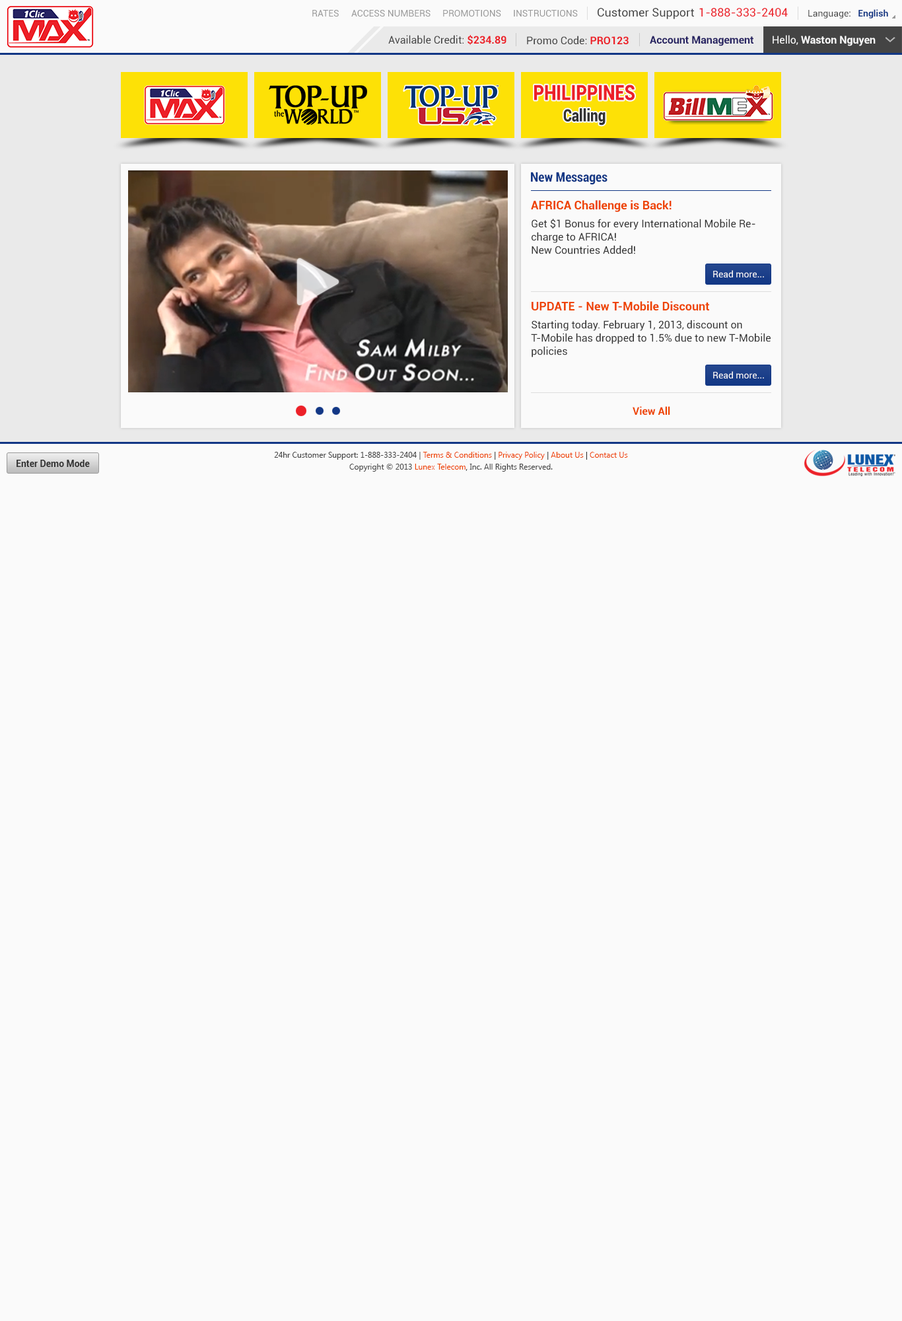
<style>
.page{position:relative;width:902px;height:1321px;background:#fafafa}
.page>*{position:absolute;margin:0}
.t1{font:9.2px "Roboto-Regular";color:#999999}
.t2{font:11.6px "Roboto-Regular";color:#444444}
.t3{font:11.6px "Roboto-Regular";color:#ec2029}
.t4{font:9.2px "Roboto-Regular";color:#444444}
.t5{font:9.2px "Roboto-Bold";color:#123785}
.t6{font:10.6px "Roboto-Regular";color:#444444}
.t7{font:10.6px "Roboto-Bold";color:#ec2028}
.t8{font:10.6px "Roboto-Bold";color:#262262}
.t9{font:10.6px "Roboto-Bold";color:#fafafa}
.t10{font:10.6px "Roboto-Regular";color:#fafafa}
.t11{font:21.1px "Roboto-Black";color:#ec2028;scale:0.81 1}
.t12{font:16.9px "Roboto-Black";color:#333333;scale:0.81 1}
.t13{font:13.2px "Roboto-BoldCondensed";color:#123785}
.t14{font:11.9px "Roboto-Bold";color:#ee4400}
.t15{font:10.6px/13.2px "Roboto-Regular";color:#333333}
.t16{font:9.2px "Roboto-Regular";color:#fafafa}
.t17{font:10.6px "Roboto-Bold";color:#ee4400}
.t18{font:9.2px "Roboto-Bold";color:#333333}
.t19{font:7.9px/11.9px "SegoeUI";color:#444444}
.t20{font:7.9px/11.9px "SegoeUI";color:#ee4400}
.t21{font:7.9px/11.9px "SegoeUI";color:#333333}
</style>
<div class="page">
<p class="t1" style="left:312px;top:10px;width:27px;height:7px">RATES</p>
<p class="t1" style="left:351px;top:10px;width:80px;height:7px">ACCESS NUMBERS</p>
<p class="t1" style="left:443px;top:10px;width:58px;height:7px">PROMOTIONS</p>
<p class="t1" style="left:514px;top:10px;width:64px;height:7px">INSTRUCTIONS</p>
<p class="t2" style="left:598px;top:8px;width:96px;height:11px">Customer Support</p>
<p class="t3" style="left:700px;top:8px;width:88px;height:9px">1-888-333-2404</p>
<p class="t4" style="left:809px;top:9px;width:80px;height:9px">Language:   <span class="t5">English</span></p>
<p class="t6" style="left:388px;top:35px;width:119px;height:10px">Available Credit: <span class="t7">$234.89</span></p>
<p class="t6" style="left:527px;top:36px;width:102px;height:8px">Promo Code: <span class="t7">PRO123</span></p>
<p class="t8" style="left:650px;top:36px;width:104px;height:10px">Account Management</p>
<p class="t9" style="left:773px;top:35px;width:103px;height:11px"><span class="t10">Hello, </span>Waston Nguyen</p>
<p class="t11" style="left:534px;top:85px;width:101px;height:15px">PHILIPPINES</p>
<p class="t12" style="left:564px;top:108px;width:42px;height:18px">Calling</p>
<p class="t13" style="left:531px;top:172px;width:77px;height:13px">New Messages</p>
<p class="t14" style="left:531px;top:200px;width:141px;height:12px">AFRICA Challenge is Back!</p>
<p class="t15" style="left:532px;top:219px;width:224px;height:35px">Get $1 Bonus for every International Mobile Recharge to AFRICA!<br>New Countries Added!</p>
<p class="t16" style="left:714px;top:270px;width:50px;height:8px">Read more...</p>
<p class="t14" style="left:532px;top:301px;width:178px;height:10px">UPDATE - New T-Mobile Discount</p>
<p class="t15" style="left:531px;top:320px;width:240px;height:37px">Starting today. February 1, 2013, discount on T-Mobile has dropped to 1.5% due to new T-Mobile policies</p>
<p class="t16" style="left:714px;top:371px;width:50px;height:8px">Read more...</p>
<p class="t17" style="left:633px;top:406px;width:38px;height:9px">View All</p>
<p class="t18" style="left:17px;top:460px;width:73px;height:7px">Enter Demo Mode</p>
<p class="t19" style="left:274px;top:452px;width:354px;height:20px;text-align:center">24hr Customer Support: 1-888-333-2404 | <span class="t20">Terms &amp; Conditions</span><span class="t21"> | </span><span class="t20">Privacy Policy</span><span class="t21"> | </span><span class="t20">About Us</span><span class="t21"> | </span><span class="t20">Contact Us<br></span>Copyright © 2013 <span class="t20">Lunex Telecom</span><span class="t21">,</span> Inc. All Rights Reserved.</p>
</div>
